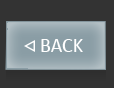
<style>
.page{position:relative;width:114px;height:88px;background:#333333}
.page>*{position:absolute;margin:0}
.t1{font:20px "Calibri";color:#ffffff}
</style>
<div class="page">
<p class="t1" style="left:41px;top:39px;width:42px;height:13px">BACK</p>
</div>
